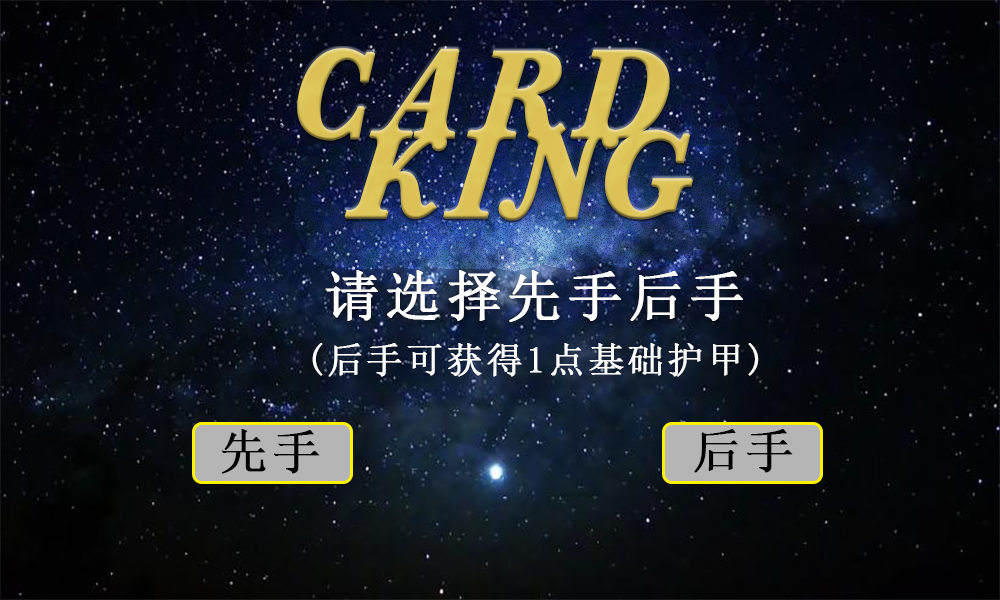
<style>
.page{position:relative;width:1000px;height:600px}
.page>*{position:absolute;margin:0}
.t1{font:120px/80px "HGH2X_CNKI";letter-spacing:0.08em;color:#dec75b;font-weight:bold}
.t2{font:55px "SimSun";letter-spacing:0.08em;color:#ffffff;font-weight:bold}
.t3{font:36px "SimSun";letter-spacing:0.08em;color:#ffffff;font-weight:bold}
.t4{font:48px "SimSun";letter-spacing:0.08em;color:#000000;font-weight:bold}
</style>
<div class="page">
<p class="t1" style="left:297px;top:48px;width:396px;height:173px">CARD<br> KING</p>
<p class="t2" style="left:325px;top:270px;width:418px;height:52px">请选择先手后手</p>
<p class="t3" style="left:312px;top:343px;width:447px;height:34px">(后手可获得1点基础护甲)</p>
<p class="t4" style="left:221px;top:429px;width:99px;height:45px">先手</p>
<p class="t4" style="left:694px;top:429px;width:99px;height:44px">后手</p>
</div>
